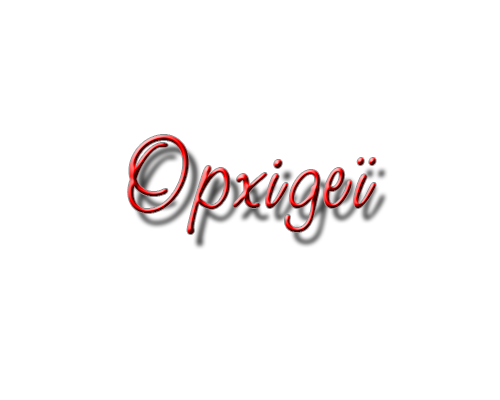
<style>
.page{position:relative;width:500px;height:400px;background:#ffffff}
.page>*{position:absolute;margin:0}
.t1{font:100px "StudioScriptCTT"}
</style>
<div class="page">
<p class="t1" style="left:128px;top:135px;width:248px;height:99px">Орхідеї</p>
</div>
